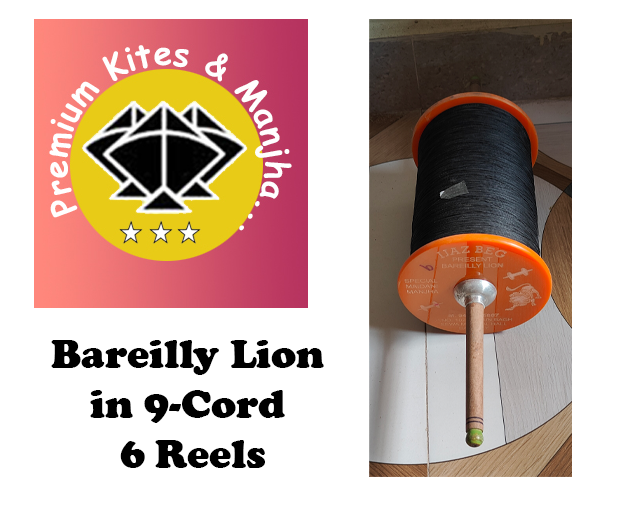
<style>
.page{position:relative;width:634px;height:521px;background:#ffffff}
.page>*{position:absolute;margin:0}
.t1{font:41.7px "CooperBlack";color:#000000}
</style>
<div class="page">
<p class="t1" style="left:51px;top:340px;width:273px;height:128px;text-align:center">Bareilly Lion<br>in 9-Cord<br> 6 Reels</p>
</div>
